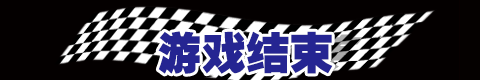
<style>
.page{position:relative;width:480px;height:80px;background:#040000}
.page>*{position:absolute;margin:0}
.t1{font:44px "CloudHeiChaoGBK";color:#252592}
</style>
<div class="page">
<p class="t1" style="left:158px;top:31px;width:175px;height:43px">游戏结束</p>
</div>
